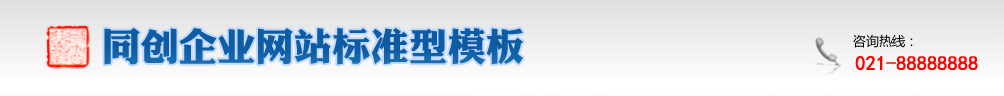
<style>
.page{position:relative;width:1004px;height:96px}
.page>*{position:absolute;margin:0}
.t1{font:38px "DFPLiJinHeiW8";letter-spacing:0.01em;color:#0e5ca4}
.t2{font:20px "¿¬Ìå";letter-spacing:0.01em;color:#ff0000;font-weight:bold}
</style>
<div class="page">
<p class="t1" style="left:104px;top:28px;width:419px;height:37px">同创企业网站标准型模板</p>
<p class="t2" style="left:855px;top:56px;width:123px;height:14px">021-88888888</p>
</div>
